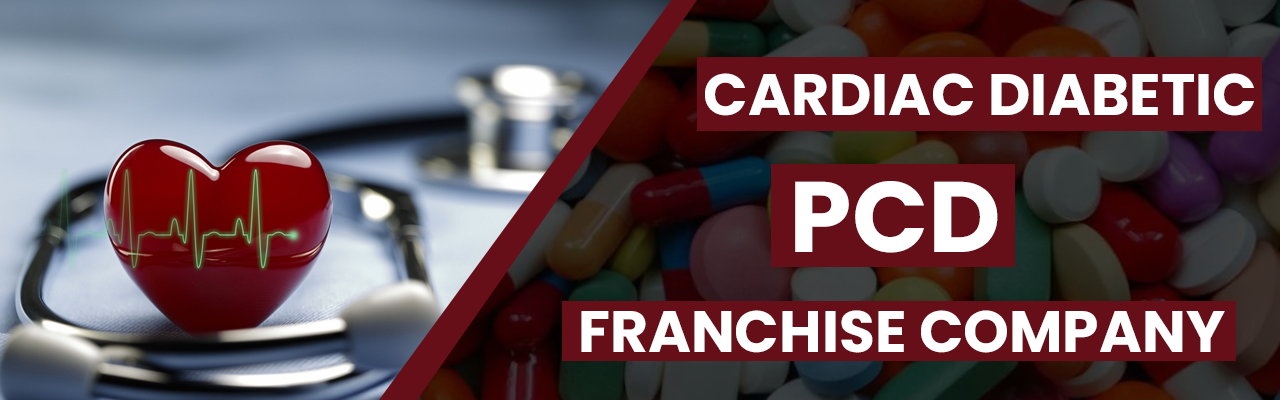
<style>
.page{position:relative;width:1280px;height:400px}
.page>*{position:absolute;margin:0}
.t1{font:58.3px "Poppins-Bold";color:#ffffff}
.t2{font:58.3px/100px "Poppins-Bold";color:#ffffff}
.t3{font:100px/100px "Poppins-Bold";color:#ffffff}
</style>
<div class="page">
<p class="t1" style="left:705px;top:73px;width:549px;height:43px">CARDIAC DIABETIC</p>
<p class="t2" style="left:581px;top:181px;width:644px;height:172px;text-align:center"><span class="t3">PCD<br></span> FRANCHISE COMPANY</p>
</div>
